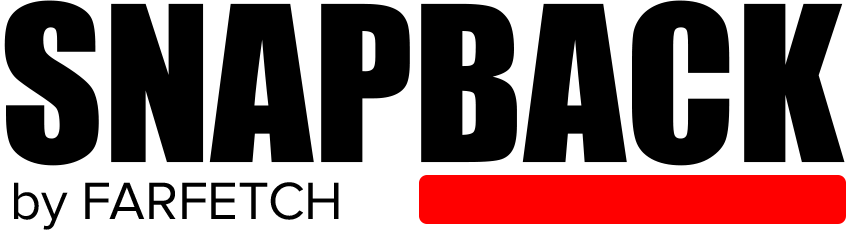
<style>
.page{position:relative;width:855px;height:233px;background:#000000}
.page>*{position:absolute;margin:0}
.t1{font:200px "Impact";color:#000000}
.t2{font:54.2px "ProximaNova-Regular";color:#000000}
</style>
<div class="page">
<p class="t1" style="left:4px;top:0px;width:841px;height:166px;rotate:-90deg">SNAPBACK</p>
<p class="t2" style="left:14px;top:182px;width:325px;height:48px">by FARFETCH</p>
</div>
